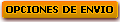
<style>
.page{position:relative;width:120px;height:22px}
.page>*{position:absolute;margin:0}
.t1{font:10px "Verdana-Bold";letter-spacing:-0.1em;color:#000000}
</style>
<div class="page">
<p class="t1" style="left:6px;top:6px;width:107px;height:7px">OPCIONES  DE  ENVIO</p>
</div>
